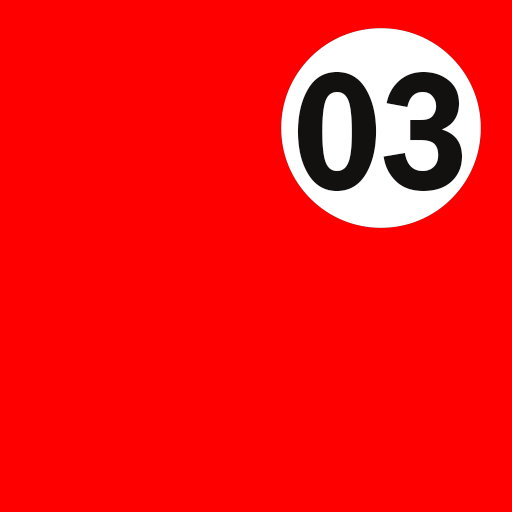
<style>
.page{position:relative;width:512px;height:512px;background:#ff0001}
.page>*{position:absolute;margin:0}
.t1{font:172.5px "FranklinGothic-Demi";color:#131010;scale:0.87 1}
</style>
<div class="page">
<p class="t1" style="left:297px;top:72px;width:165px;height:119px">03</p>
</div>
